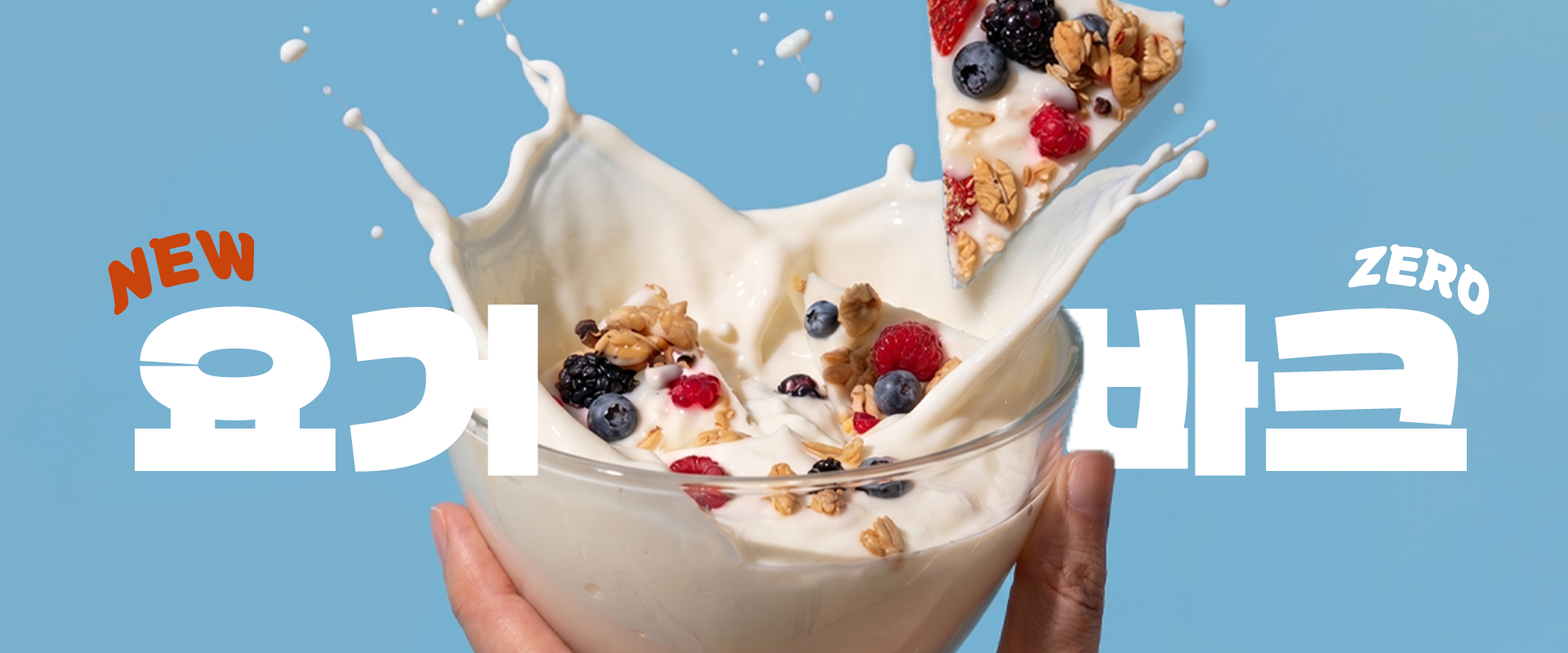
<style>
.page{position:relative;width:1568px;height:653px}
.page>*{position:absolute;margin:0}
.t1{font:58.5px "KERISKEDU_B";letter-spacing:0.02em;color:#c8440a;font-weight:bold}
.t2{font:46px "KERISKEDU_B";letter-spacing:0.02em;color:#ffffff}
.t3{font:184px "Partial-Sans-KR";letter-spacing:0.02em;color:#ffffff}
</style>
<div class="page">
<p class="t1" style="left:108px;top:230px;width:147px;height:85px;rotate:-12deg">NEW</p>
<p class="t2" style="left:1348px;top:244px;width:142px;height:71px;rotate:14deg">ZERO</p>
<p class="t3" style="left:135px;top:305px;width:403px;height:171px">요거</p>
<p class="t3" style="left:1059px;top:305px;width:408px;height:171px">바크</p>
</div>
